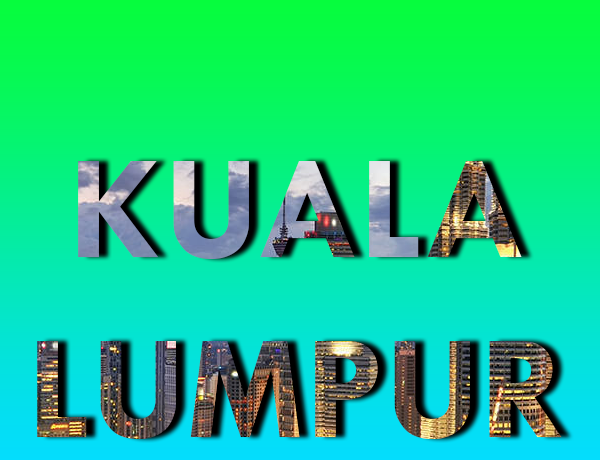
<style>
.page{position:relative;width:600px;height:460px}
.page>*{position:absolute;margin:0}
.t1{font:150px "TwCenMT-Bold"}
</style>
<div class="page">
<p class="t1" style="left:37px;top:161px;width:525px;height:278px;text-align:center">KUALA<br>LUMPUR</p>
</div>
